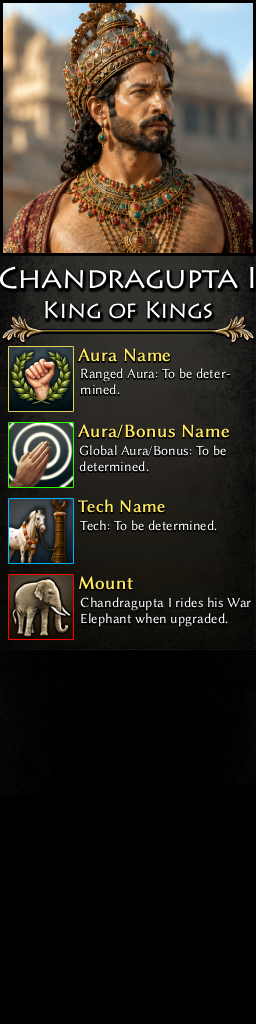
<style>
.page{position:relative;width:256px;height:1024px;background:#000000}
.page>*{position:absolute;margin:0}
.t1{font:30px/30px "Lithos";letter-spacing:-0.02em;color:#ffffff}
.t2{font:24px/30px "Lithos";letter-spacing:-0.02em;color:#ffffff}
.t3{font:19px "LinBiolinumO";color:#ffe963;font-weight:bold}
.t4{font:14px "LinBiolinumO";color:#ffffff}
.t5{font:18px "LinBiolinumO";color:#ffe963;font-weight:bold}
</style>
<div class="page">
<p class="t1" style="left:0px;top:266px;width:254px;height:53px;text-align:center">Chandragupta I<br><span class="t2">King of Kings</span></p>
<p class="t3" style="left:78px;top:348px;width:93px;height:14px">Aura Name</p>
<p class="t4" style="left:81px;top:368px;width:150px;height:27px">Ranged Aura: To be deter-<br>mined.</p>
<p class="t3" style="left:78px;top:424px;width:152px;height:15px">Aura/Bonus Name</p>
<p class="t4" style="left:79px;top:445px;width:147px;height:27px">Global Aura/Bonus: To be<br>determined.</p>
<p class="t5" style="left:78px;top:499px;width:87px;height:14px">Tech Name</p>
<p class="t4" style="left:80px;top:520px;width:137px;height:11px">Tech: To be determined.</p>
<p class="t3" style="left:78px;top:576px;width:55px;height:14px">Mount</p>
<p class="t4" style="left:80px;top:597px;width:171px;height:30px">Chandragupta I rides his War<br>Elephant when upgraded.</p>
</div>
